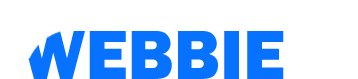
<style>
.page{position:relative;width:358px;height:79px;background:#ffffff}
.page>*{position:absolute;margin:0}
.t1{font:72px "FranklinGothic-Heavy";color:#0672ff}
.t2{font:36px "FranklinGothic-Heavy";color:#ffffff}
.t3{font:36px "ErasITC-Bold";color:#ffffff}
</style>
<div class="page">
<p class="t1" style="left:21px;top:31px;width:337px;height:48px">WEBBIE<span class="t2">.</span><span class="t3">AR</span><span class="t2">.</span></p>
</div>
